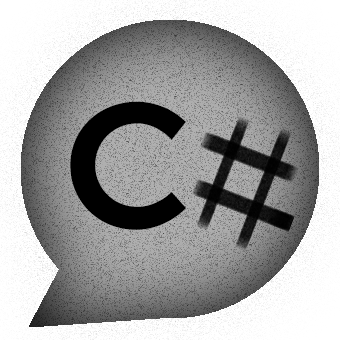
<style>
.page{position:relative;width:340px;height:340px;background:#ffffff}
.page>*{position:absolute;margin:0}
.t1{font:180px "MontserratAlternates-Medium";color:#000000}
</style>
<div class="page">
<p class="t1" style="left:70px;top:101px;width:116px;height:129px">C</p>
</div>
